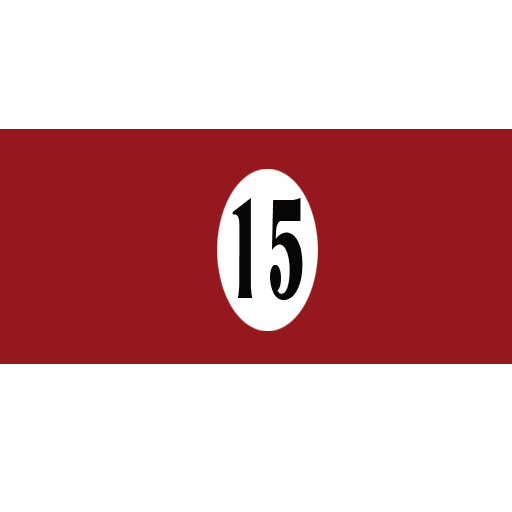
<style>
.page{position:relative;width:512px;height:512px;background:#ffffff}
.page>*{position:absolute;margin:0}
.t1{font:135.9px "TennesseeHeavySFBold";color:#070605;scale:0.48 1}
</style>
<div class="page">
<p class="t1" style="left:232px;top:198px;width:71px;height:102px">15</p>
</div>
